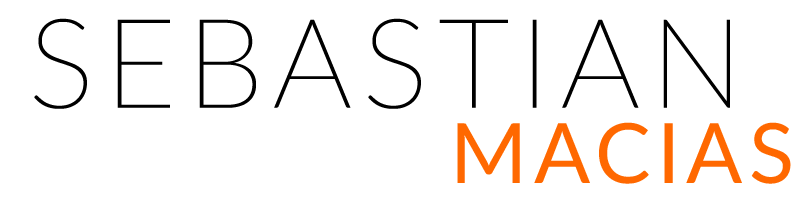
<style>
.page{position:relative;width:800px;height:200px;background:#ffffff}
.page>*{position:absolute;margin:0}
.t1{font:125px "Lato-Thin";letter-spacing:0.075em;color:#000000}
.t2{font:83.3px "Lato-Regular";letter-spacing:0.075em;color:#ff6800}
</style>
<div class="page">
<p class="t1" style="left:34px;top:18px;width:696px;height:91px">SEBASTIAN</p>
<p class="t2" style="left:457px;top:122px;width:334px;height:62px">MACIAS</p>
</div>
